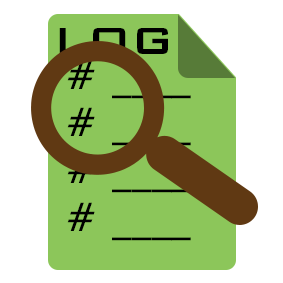
<style>
.page{position:relative;width:283px;height:283px;background:#ffffff}
.page>*{position:absolute;margin:0}
.t1{font:50.5px "BankGothicBold";color:#000000}
.t2{font:39.5px "BankGothicBold";color:#000000}
</style>
<div class="page">
<p class="t1" style="left:59px;top:28px;width:109px;height:26px">LOG</p>
<p class="t2" style="left:67px;top:60px;width:124px;height:181px;text-align:center"># ____<br># ____<br># ____<br># ____</p>
</div>
